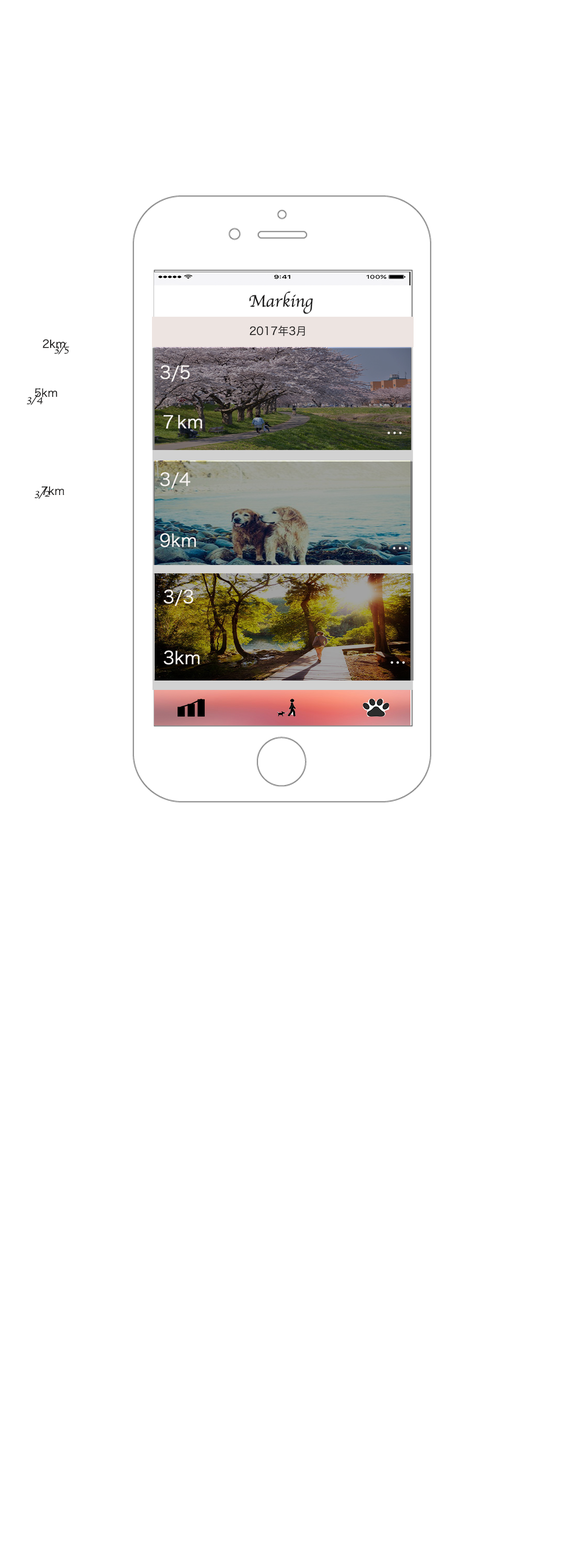
<style>
.page{position:relative;width:564px;height:1568px;background:#ffffff}
.page>*{position:absolute;margin:0}
.t1{font:17.4px "Apple-Chancery";color:#1e1d1d}
.t2{font:10.9px "HiraKakuProN-W3";color:#1e1d1d}
.t3{font:10.9px "Apple-Chancery";color:#1e1d1d}
.t4{font:17.4px "HiraKakuProN-W3";color:#f8f4f2}
</style>
<div class="page">
<p class="t1" style="left:249px;top:291px;width:64px;height:23px">Marking</p>
<p class="t2" style="left:250px;top:326px;width:55px;height:10px">2017年3月</p>
<p class="t2" style="left:43px;top:339px;width:22px;height:9px">2km</p>
<p class="t3" style="left:54px;top:342px;width:16px;height:12px">3/5</p>
<p class="t4" style="left:160px;top:365px;width:42px;height:64px">3/5<br><br>７km</p>
<p class="t2" style="left:34px;top:388px;width:23px;height:9px">5km</p>
<p class="t3" style="left:27px;top:393px;width:16px;height:12px">3/4</p>
<p class="t4" style="left:388px;top:432px;width:14px;height:2px">…</p>
<p class="t4" style="left:160px;top:472px;width:37px;height:75px">3/4<br><br>9km</p>
<p class="t3" style="left:34px;top:487px;width:16px;height:12px">3/2</p>
<p class="t2" style="left:42px;top:486px;width:22px;height:9px">7km</p>
<p class="t4" style="left:393px;top:547px;width:15px;height:2px">…</p>
<p class="t4" style="left:164px;top:590px;width:36px;height:75px">3/3<br><br>3km</p>
<p class="t4" style="left:391px;top:661px;width:14px;height:3px">…</p>
</div>
